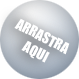
<style>
.page{position:relative;width:79px;height:79px;background:#ffffff}
.page>*{position:absolute;margin:0}
.t1{font:14px "Impact";color:#ffffff}
</style>
<div class="page">
<p class="t1" style="left:14px;top:18px;width:56px;height:45px;text-align:center;rotate:27deg">ARRASTRA <br>AQUI</p>
</div>
